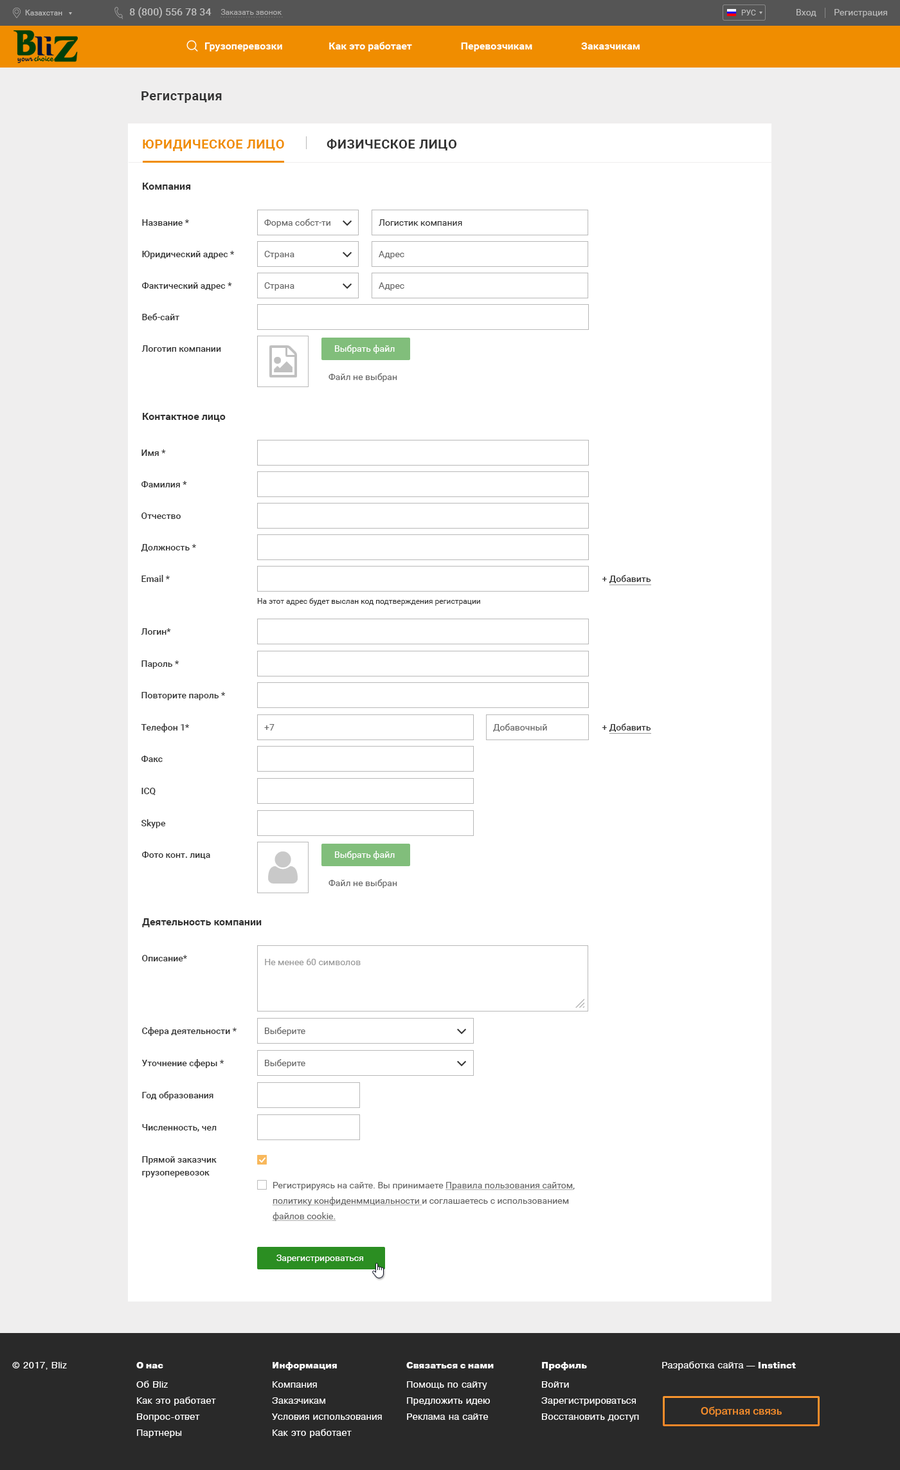
<style>
.page{position:relative;width:900px;height:1470px;background:#ffffff}
.page>*{position:absolute;margin:0}
.t1{font:12.9px "Roboto-Bold";letter-spacing:0.03em;color:#333333}
.t2{font:12.9px "Roboto-Bold";letter-spacing:0.03em;color:#f08d00;text-transform:uppercase}
.t3{font:12.9px "Roboto-Bold";letter-spacing:0.03em;color:#333333;text-transform:uppercase}
.t4{font:10.3px "Roboto-Bold";color:#333333}
.t5{font:9px "Roboto-Medium";color:#333333}
.t6{font:9px "Roboto-Regular";color:#666666}
.t7{font:9px "Roboto-Regular";color:#333333}
.t8{font:9px "Roboto-Regular";color:#ffffff}
.t9{font:7.7px "Roboto-Regular";color:#333333}
.t10{font:9px "Roboto-Regular";color:#999999}
.t11{font:9px/12.9px "Roboto-Medium";color:#333333}
.t12{font:9px/15.4px "Roboto-Regular";color:#666666}
.t13{font:9px/15.4px "Roboto-Regular";color:#666666;text-decoration:underline}
</style>
<div class="page">
<p class="t1" style="left:141px;top:91px;width:81px;height:12px">Регистрация</p>
<p class="t2" style="left:143px;top:139px;width:313px;height:12px">Юридическое лицо             <span class="t3">Физическое лицо</span></p>
<p class="t4" style="left:143px;top:183px;width:48px;height:7px">Компания</p>
<p class="t5" style="left:142px;top:219px;width:47px;height:7px">Название *</p>
<p class="t6" style="left:264px;top:219px;width:66px;height:9px">Форма собст-ти</p>
<p class="t7" style="left:379px;top:219px;width:83px;height:7px">Логистик компания</p>
<p class="t5" style="left:142px;top:251px;width:92px;height:8px">Юридический адрес *</p>
<p class="t6" style="left:264px;top:251px;width:30px;height:8px">Страна</p>
<p class="t6" style="left:379px;top:251px;width:25px;height:8px">Адрес</p>
<p class="t5" style="left:142px;top:282px;width:90px;height:9px">Фактический адрес *</p>
<p class="t6" style="left:264px;top:282px;width:30px;height:9px">Страна</p>
<p class="t6" style="left:379px;top:282px;width:25px;height:9px">Адрес</p>
<p class="t5" style="left:142px;top:313px;width:37px;height:7px">Веб-сайт</p>
<p class="t5" style="left:141px;top:345px;width:80px;height:7px">Логотип компании</p>
<p class="t8" style="left:335px;top:345px;width:60px;height:9px">Выбрать файл</p>
<p class="t6" style="left:328px;top:373px;width:69px;height:9px">Файл не выбран</p>
<p class="t4" style="left:143px;top:413px;width:83px;height:9px">Контактное лицо</p>
<p class="t5" style="left:141px;top:449px;width:25px;height:7px">Имя *</p>
<p class="t5" style="left:141px;top:481px;width:46px;height:6px">Фамилия *</p>
<p class="t5" style="left:141px;top:512px;width:40px;height:7px">Отчество</p>
<p class="t5" style="left:141px;top:544px;width:55px;height:8px">Должность *</p>
<p class="t5" style="left:141px;top:575px;width:29px;height:7px">Email *</p>
<p class="t5" style="left:602px;top:575px;width:49px;height:8px">+ Добавить</p>
<p class="t9" style="left:257px;top:598px;width:223px;height:8px">На этот адрес будет выслан код подтверждения регистрации</p>
<p class="t5" style="left:141px;top:628px;width:30px;height:6px">Логин*</p>
<p class="t5" style="left:141px;top:660px;width:38px;height:9px">Пароль *</p>
<p class="t5" style="left:141px;top:692px;width:84px;height:8px">Повторите пароль *</p>
<p class="t5" style="left:141px;top:723px;width:48px;height:9px">Телефон 1*</p>
<p class="t6" style="left:264px;top:724px;width:10px;height:6px">+7</p>
<p class="t6" style="left:493px;top:723px;width:54px;height:9px">Добавочный</p>
<p class="t5" style="left:602px;top:723px;width:49px;height:9px">+ Добавить</p>
<p class="t5" style="left:141px;top:755px;width:22px;height:7px">Факс</p>
<p class="t5" style="left:141px;top:788px;width:15px;height:7px">ICQ</p>
<p class="t5" style="left:141px;top:819px;width:25px;height:9px">Skype</p>
<p class="t5" style="left:142px;top:851px;width:68px;height:8px">Фото конт. лица</p>
<p class="t8" style="left:335px;top:851px;width:60px;height:9px">Выбрать файл</p>
<p class="t6" style="left:328px;top:879px;width:69px;height:9px">Файл не выбран</p>
<p class="t4" style="left:142px;top:918px;width:120px;height:9px">Деятельность компании</p>
<p class="t5" style="left:142px;top:955px;width:45px;height:6px">Описание*</p>
<p class="t10" style="left:265px;top:959px;width:96px;height:6px">Не менее 60 символов</p>
<p class="t5" style="left:142px;top:1027px;width:95px;height:9px">Сфера деятельности *</p>
<p class="t6" style="left:265px;top:1027px;width:40px;height:9px">Выберите</p>
<p class="t5" style="left:141px;top:1059px;width:83px;height:9px">Уточнение сферы *</p>
<p class="t6" style="left:265px;top:1059px;width:40px;height:9px">Выберите</p>
<p class="t5" style="left:142px;top:1091px;width:71px;height:9px">Год образования</p>
<p class="t5" style="left:142px;top:1124px;width:75px;height:7px">Численность, чел</p>
<p class="t11" style="left:142px;top:1156px;width:75px;height:21px">Прямой заказчик <br>грузоперевозок</p>
<p class="t12" style="left:272px;top:1182px;width:303px;height:39px">Регистрируясь на сайте. Вы принимаете <span class="t13">Правила пользования сайтом</span>, <span class="t13">политику конфиденммциальности </span>и соглашаетесь с использованием <span class="t13">файлов cookie.</span></p>
<p class="t8" style="left:276px;top:1254px;width:87px;height:9px">Зарегистрироваться</p>
</div>
